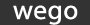
<style>
.page{position:relative;width:90px;height:25px;background:#333333}
.page>*{position:absolute;margin:0}
.t1{font:27px "MyriadPro-Regular";color:#ffffff;font-weight:bold}
</style>
<div class="page">
<p class="t1" style="left:13px;top:5px;width:65px;height:20px">wego</p>
</div>
